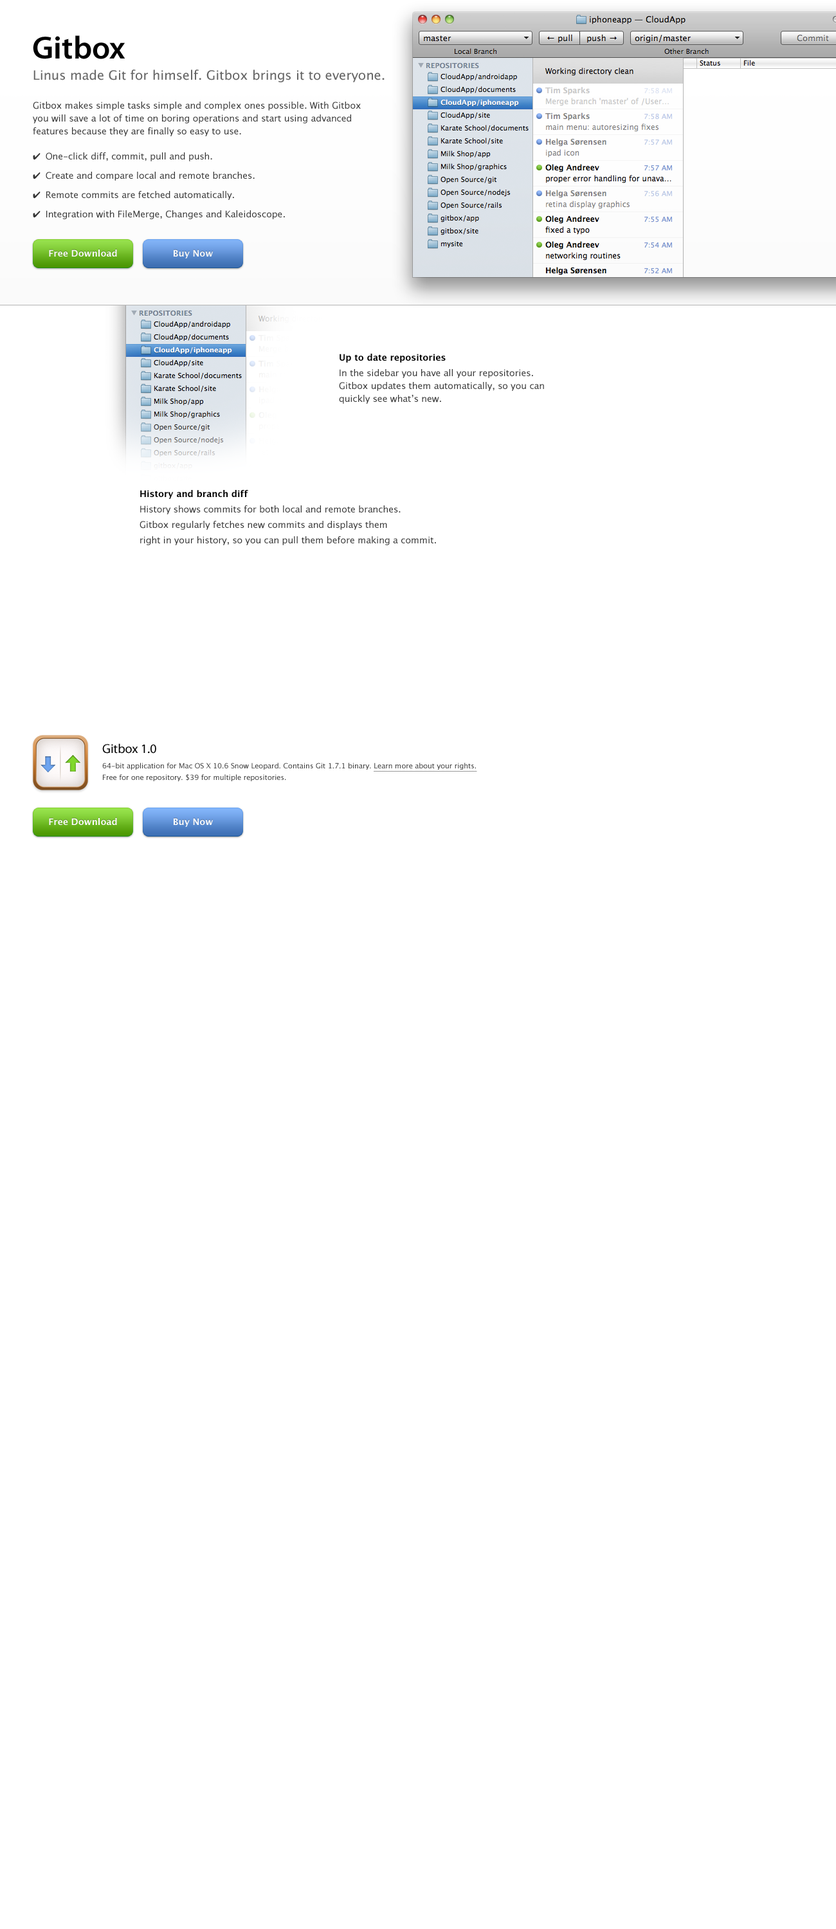
<style>
.page{position:relative;width:836px;height:1929px;background:#ffffff}
.page>*{position:absolute;margin:0}
.t1{font:32.1px "MyriadPro-Semibold";color:#000000}
.t2{font:12.9px "LucidaGrande";color:#666666}
.t3{font:9px/12.9px "LucidaGrande";color:#333333}
.t4{font:9px/19.3px "LucidaGrande";color:#333333}
.t5{font:9px/19.3px "ZapfDingbatsITC";color:#333333}
.t6{font:9px "LucidaGrande-Bold";color:#ffffff}
.t7{font:9px/12.9px "LucidaGrande-Bold";color:#000000}
.t8{font:9px/15.4px "LucidaGrande";color:#333333}
.t9{font:7.1px/11.6px "LucidaGrande";color:#343434}
.t10{font:12.9px/15.4px "MyriadPro-Regular";color:#000000}
.t11{font:7.1px/15.4px "LucidaGrande";color:#343434}
.t12{font:7.1px/11.6px "LucidaGrande";color:#343434;text-decoration:underline}
</style>
<div class="page">
<p class="t1" style="left:33px;top:35px;width:92px;height:24px">Gitbox</p>
<p class="t2" style="left:33px;top:69px;width:351px;height:13px">Linus made Git for himself. Gitbox brings it to everyone.</p>
<p class="t3" style="left:33px;top:102px;width:328px;height:34px">Gitbox makes simple tasks simple and complex ones possible. With Gitbox <br>you will save a lot of time on boring operations and start using advanced<br>features because they are finally so easy to use.</p>
<p class="t4" style="left:33px;top:152px;width:252px;height:67px"><span class="t5">✔  </span>One-click diff, commit, pull and push.<br><span class="t5">✔  </span>Create and compare local and remote branches.<br><span class="t5">✔  </span>Remote commits are fetched automatically.<br><span class="t5">✔  </span>Integration with FileMerge, Changes and Kaleidoscope.</p>
<p class="t6" style="left:49px;top:249px;width:68px;height:7px">Free Download</p>
<p class="t6" style="left:174px;top:249px;width:39px;height:9px">Buy Now</p>
<p class="t3" style="left:339px;top:354px;width:205px;height:50px"><span class="t7">Up to date repositories<br></span><span class="t8">In the sidebar you have all your repositories.<br></span>Gitbox updates them automatically, so you can<br>quickly see what’s new.</p>
<p class="t8" style="left:140px;top:490px;width:296px;height:55px"><span class="t7">History and branch diff<br></span>History shows commits for both local and remote branches.<br>Gitbox regularly fetches new commits and displays them<br>right in your history, so you can pull them before making a commit.</p>
<p class="t9" style="left:102px;top:743px;width:375px;height:38px"><span class="t10">Gitbox 1.0<br></span><span class="t11">64-bit application for Mac OS X 10.6 Snow Leopard. </span>Contains Git 1.7.1 binary. <span class="t12">Learn more about your rights.<br></span>Free for one repository. $39 for multiple repositories.</p>
<p class="t6" style="left:49px;top:818px;width:68px;height:7px">Free Download</p>
<p class="t6" style="left:174px;top:818px;width:39px;height:9px">Buy Now</p>
</div>
